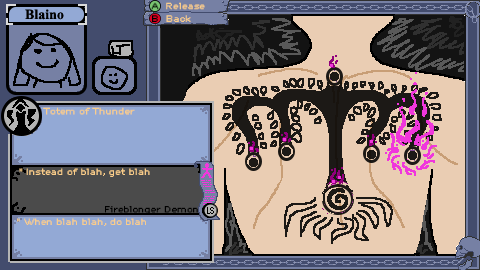
<style>
.page{position:relative;width:480px;height:270px;background:#eacdb3}
.page>*{position:absolute;margin:0}
.t1{font:8px "DePixel-Breit";color:#facd8a}
.t2{font:8px "DePixel-Breit";color:#000000}
</style>
<div class="page">
<p class="t1" style="left:151px;top:2px;width:54px;height:8px"><span class="t2">A  </span>Release</p>
<p class="t1" style="left:43px;top:107px;width:92px;height:8px">Totem of Thunder</p>
<p class="t1" style="left:19px;top:168px;width:131px;height:9px">* Instead of blah, get blah</p>
<p class="t2" style="left:105px;top:206px;width:93px;height:9px">Fireblonger Demon</p>
<p class="t1" style="left:17px;top:218px;width:129px;height:8px">* When blah blah, do blah</p>
</div>
